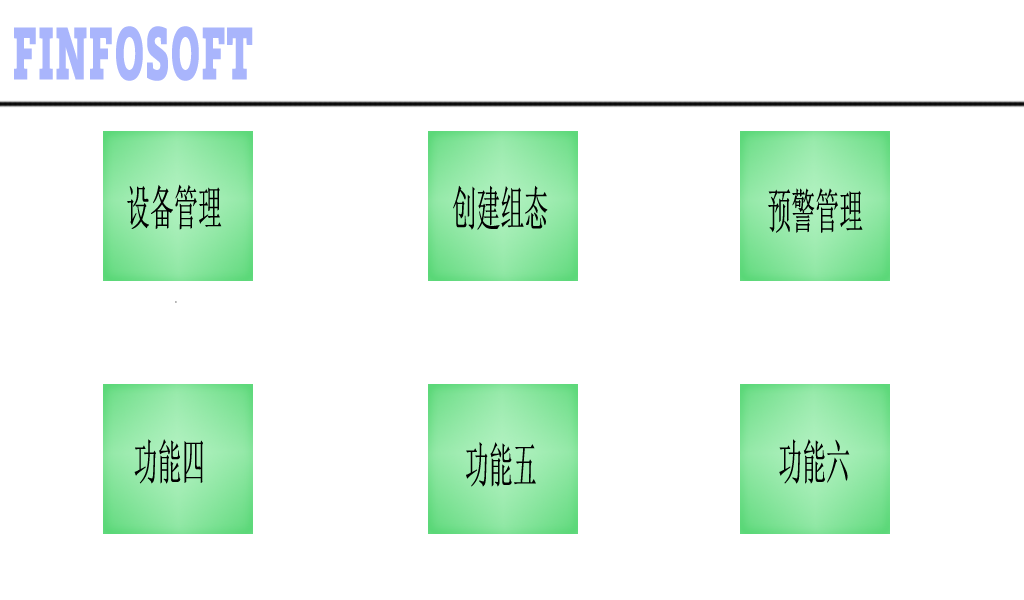
<style>
.page{position:relative;width:1024px;height:600px;background:#ffffff}
.page>*{position:absolute;margin:0}
.t1{font:96px "SiemensSlabSC-Black";color:#a9b5fc;scale:0.5 1}
.t2{font:48px "SimSun";color:#000000;scale:0.5 1}
</style>
<div class="page">
<p class="t1" style="left:14px;top:26px;width:239px;height:55px">finfosoft</p>
<p class="t2" style="left:127px;top:184px;width:95px;height:46px">设备管理</p>
<p class="t2" style="left:453px;top:185px;width:95px;height:45px">创建组态</p>
<p class="t2" style="left:768px;top:188px;width:95px;height:45px">预警管理</p>
<p class="t2" style="left:134px;top:439px;width:69px;height:45px">功能四</p>
<p class="t2" style="left:466px;top:442px;width:70px;height:45px">功能五</p>
<p class="t2" style="left:779px;top:439px;width:71px;height:45px">功能六</p>
</div>
